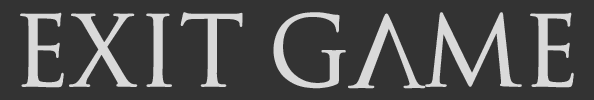
<style>
.page{position:relative;width:594px;height:100px;background:#333333}
.page>*{position:absolute;margin:0}
.t1{font:95.5px "SpaceandAstronomy";color:#d9d9d9}
</style>
<div class="page">
<p class="t1" style="left:20px;top:12px;width:554px;height:77px">Exit Game</p>
</div>
